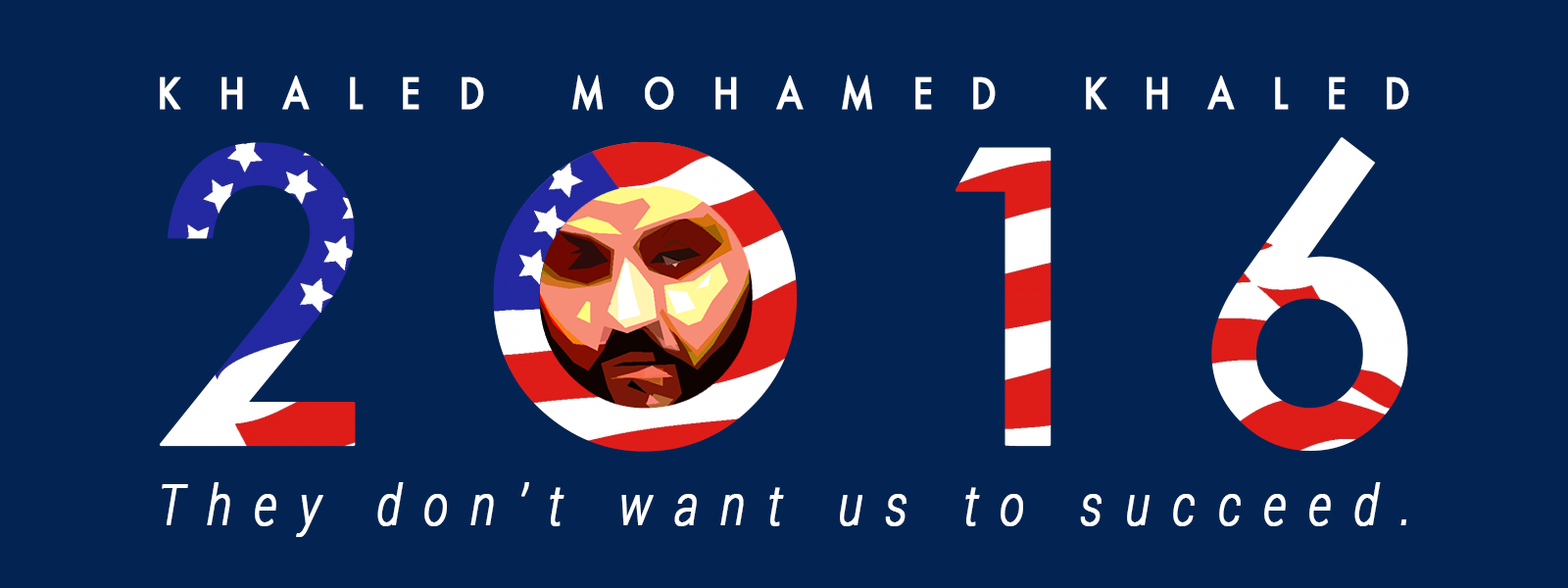
<style>
.page{position:relative;width:1568px;height:588px;background:#032452}
.page>*{position:absolute;margin:0}
.t1{font:42px "Futura-Medium";letter-spacing:1.05em;color:#ffffff;font-variant:small-caps;font-weight:bold;scale:0.84 1}
.t2{font:393.1px "Futura-Medium";letter-spacing:0.2em;font-weight:bold}
.t3{font:56px "Roboto-LightItalic";letter-spacing:0.45em;color:#ffffff;font-weight:bold;scale:0.84 1}
</style>
<div class="page">
<p class="t1" style="left:160px;top:74px;width:1249px;height:37px">KHALED MOHAMED KHALED</p>
<p class="t2" style="left:159px;top:137px;width:1249px;height:315px">2O16</p>
<p class="t3" style="left:162px;top:482px;width:1244px;height:55px">They don’t want us to succeed.</p>
</div>
